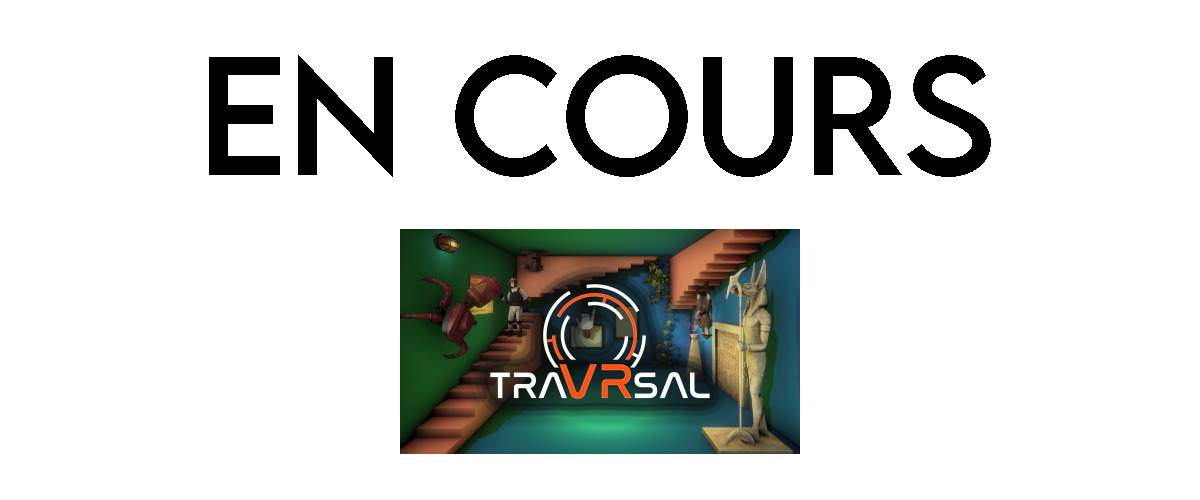
<style>
.page{position:relative;width:1200px;height:500px;background:#ffffff}
.page>*{position:absolute;margin:0}
.t1{font:150px "LEMONMILK-Regular";color:#000000}
</style>
<div class="page">
<p class="t1" style="left:209px;top:55px;width:782px;height:122px">en cours</p>
</div>
